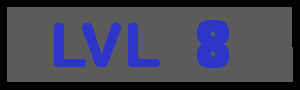
<style>
.page{position:relative;width:300px;height:90px;background:#5c5b5b}
.page>*{position:absolute;margin:0}
.t1{font:60px "ArialRoundedMTBold";color:#2d35cb;font-weight:bold}
.t2{font:60px "GillSans-UltraBoldCondensed";color:#2d35cb;font-weight:bold}
</style>
<div class="page">
<p class="t1" style="left:54px;top:23px;width:106px;height:44px">LVL</p>
<p class="t2" style="left:197px;top:20px;width:32px;height:48px">8</p>
</div>
